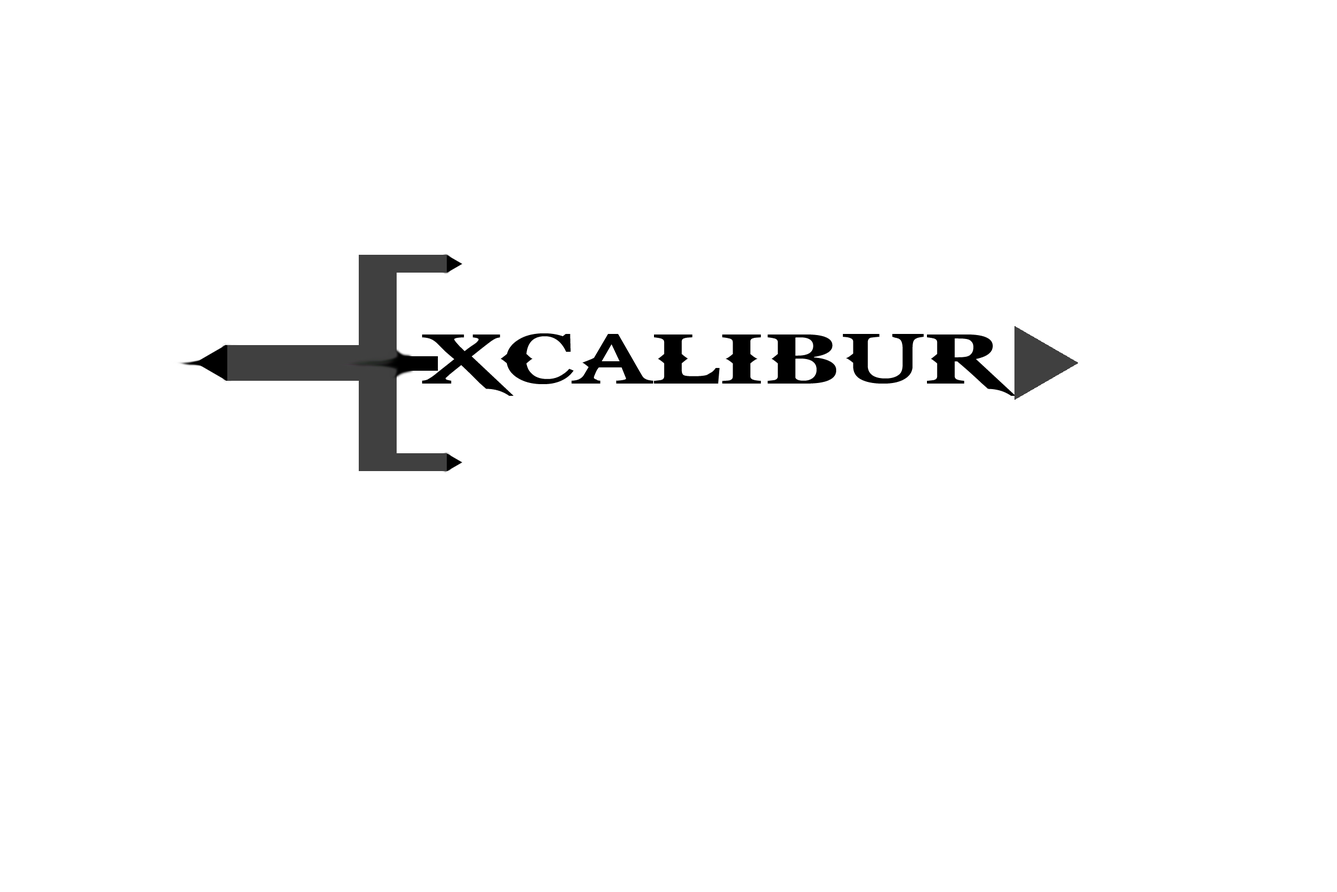
<style>
.page{position:relative;width:1337px;height:892px;background:#ffffff}
.page>*{position:absolute;margin:0}
.t1{font:77.5px "GodOfWar";color:#000000;scale:1.3 1}
</style>
<div class="page">
<p class="t1" style="left:422px;top:333px;width:594px;height:63px">XCALIBUR</p>
</div>
